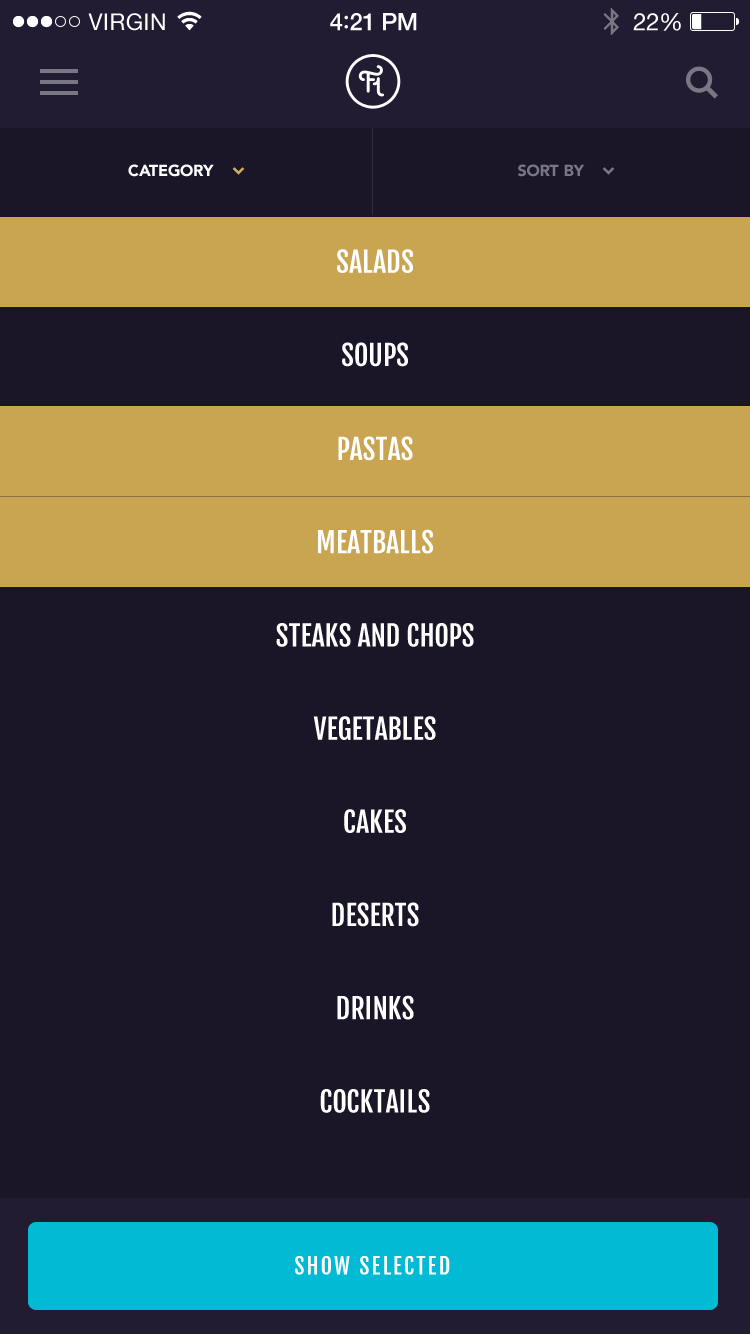
<style>
.page{position:relative;width:750px;height:1334px;background:#1b1627}
.page>*{position:absolute;margin:0}
.t1{font:16px "Avenir-Black";color:#ffffff}
.t2{font:16px "Avenir-Black";color:#7a7784}
.t3{font:28px/93.2px "FjallaOne-Regular";color:#ffffff}
.t4{font:28px/93.8px "FjallaOne-Regular";color:#ffffff}
.t5{font:22px "FjallaOne-Regular";letter-spacing:0.1em;color:#ffffff}
</style>
<div class="page">
<p class="t1" style="left:128px;top:164px;width:86px;height:13px">CATEGORY</p>
<p class="t2" style="left:517px;top:164px;width:68px;height:13px">SORT BY</p>
<p class="t3" style="left:276px;top:249px;width:198px;height:864px;text-align:center">SALADS<br>SOUPS<br><span class="t4">PASTAS<br></span>MEATBALLS<br>STEAKS AND CHOPS<br>VEGETABLES<br>CAKES<br>DESERTS<br>DRINKS<br>COCKTAILS</p>
<p class="t5" style="left:295px;top:1255px;width:155px;height:20px">SHOW SELECTED</p>
</div>
